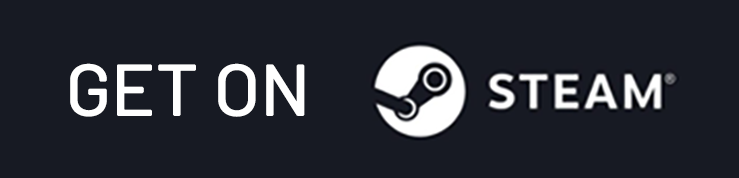
<style>
.page{position:relative;width:739px;height:178px;background:#171a23}
.page>*{position:absolute;margin:0}
.t1{font:73.3px "Barlow-Medium";color:#ffffff}
</style>
<div class="page">
<p class="t1" style="left:70px;top:63px;width:235px;height:54px">GET ON</p>
</div>
